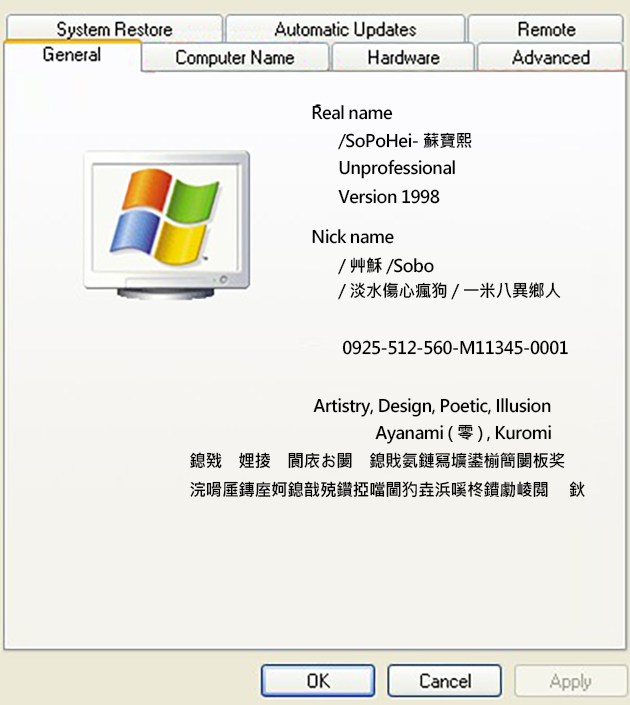
<style>
.page{position:relative;width:630px;height:705px}
.page>*{position:absolute;margin:0}
.t1{font:17.2px "MicrosoftJhengHeiBold";letter-spacing:-0.02em;color:#000000}
</style>
<div class="page">
<p class="t1" style="left:312px;top:105px;width:81px;height:15px">Real name</p>
<p class="t1" style="left:338px;top:132px;width:134px;height:18px">/SoPoHei-蘇寶熙</p>
<p class="t1" style="left:339px;top:159px;width:116px;height:20px">Unprofessional</p>
<p class="t1" style="left:338px;top:189px;width:102px;height:15px">Version 1998</p>
<p class="t1" style="left:312px;top:229px;width:82px;height:15px">Nick name</p>
<p class="t1" style="left:338px;top:257px;width:96px;height:18px">/艸穌/Sobo</p>
<p class="t1" style="left:338px;top:282px;width:223px;height:18px">/淡水傷心瘋狗/一米八異鄉人</p>
<p class="t1" style="left:342px;top:340px;width:226px;height:15px">0925-512-560-M11345-0001</p>
<p class="t1" style="left:313px;top:398px;width:238px;height:19px">Artistry, Design, Poetic, Illusion</p>
<p class="t1" style="left:375px;top:424px;width:176px;height:20px">Ayanami (零) , Kuromi</p>
</div>
